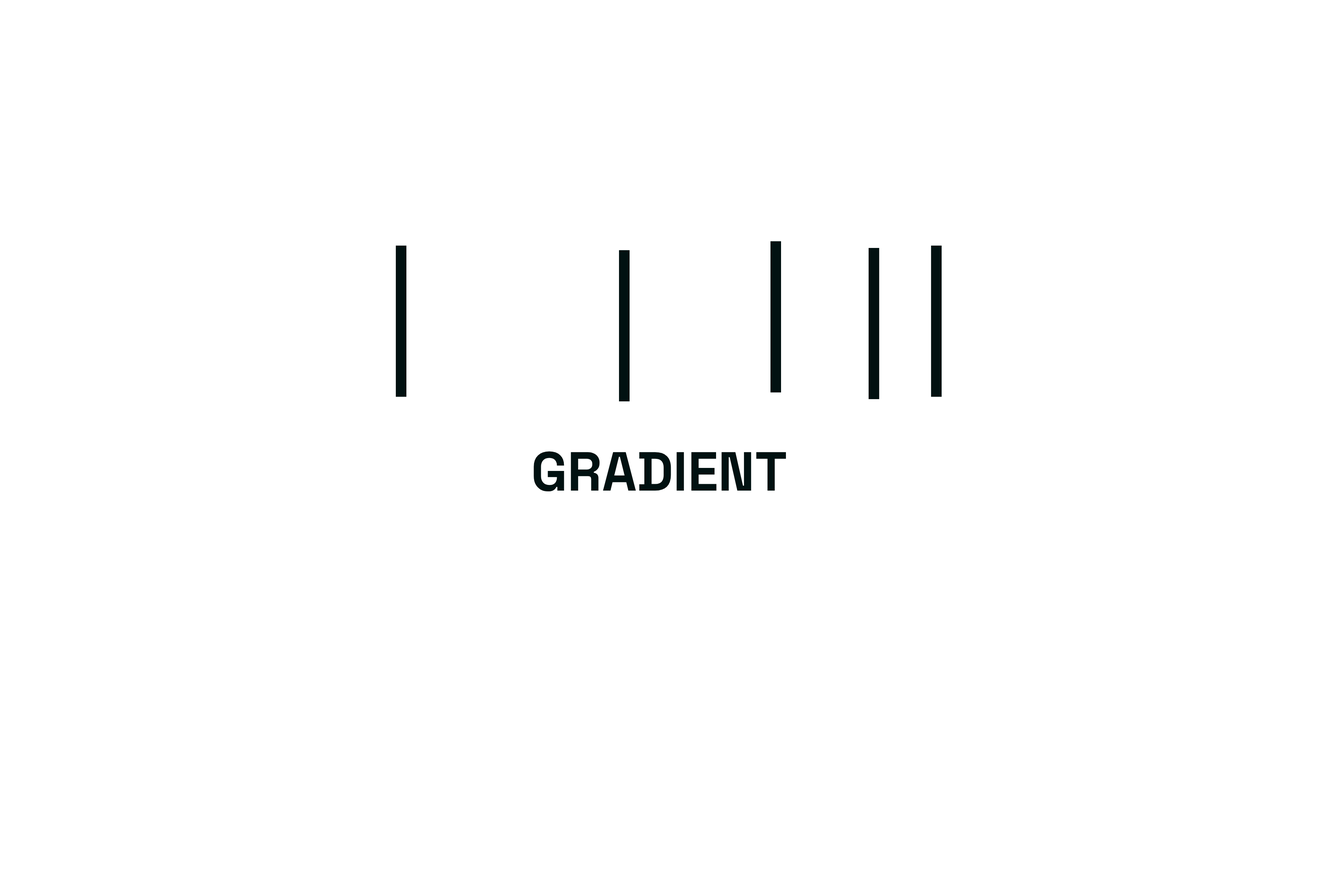
<style>
.page{position:relative;width:1337px;height:892px;background:#ffffff}
.page>*{position:absolute;margin:0}
.t1{font:54.9px "SpaceGroteskLight-Bold";color:#011111}
</style>
<div class="page">
<p class="t1" style="left:534px;top:451px;width:252px;height:40px">GRADIENT</p>
</div>
